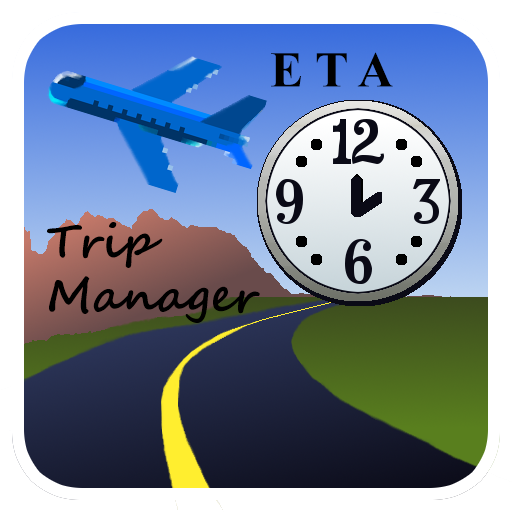
<style>
.page{position:relative;width:512px;height:512px}
.page>*{position:absolute;margin:0}
.t1{font:50px "TimesNewRomanPS-BoldMT";color:#000000}
.t2{font:45.8px "SegoeScript-Bold";color:#000000}
</style>
<div class="page">
<p class="t1" style="left:271px;top:52px;width:122px;height:35px">E T A</p>
<p class="t2" style="left:47px;top:222px;width:213px;height:101px">Trip<br>Manager</p>
</div>
